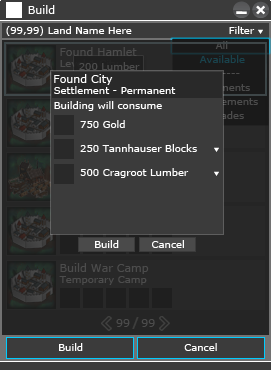
<style>
.page{position:relative;width:271px;height:370px;background:#3b3b3b}
.page>*{position:absolute;margin:0}
.t1{font:11px "Verdana";color:#ffffff}
.t2{font:10px "Verdana";color:#ffffff}
.t3{font:10px "Verdana";color:#4c4c4c}
.t4{font:11px "Verdana";color:#4c4c4c}
.t5{font:10px "Verdana";color:#19424c}
.t6{font:10px "Verdana"}
.t7{font:12px "Verdana-Bold";color:#3e3e3d}
</style>
<div class="page">
<p class="t1" style="left:28px;top:5px;width:27px;height:9px">Build</p>
<p class="t2" style="left:6px;top:26px;width:37px;height:10px">(99,99)</p>
<p class="t2" style="left:48px;top:26px;width:84px;height:8px">Land Name Here</p>
<p class="t2" style="left:229px;top:26px;width:26px;height:8px">Filter</p>
<p class="t3" style="left:215px;top:41px;width:13px;height:8px">All</p>
<p class="t4" style="left:60px;top:47px;width:77px;height:9px">Found Hamlet</p>
<p class="t3" style="left:79px;top:62px;width:61px;height:8px">200 Lumber</p>
<p class="t5" style="left:199px;top:55px;width:46px;height:8px">Available</p>
<p class="t1" style="left:54px;top:74px;width:59px;height:11px">Found City</p>
<p class="t6" style="left:204px;top:73px;width:36px;height:1px">--------</p>
<p class="t2" style="left:54px;top:86px;width:122px;height:8px">Settlement - Permanent</p>
<p class="t6" style="left:190px;top:83px;width:60px;height:8px">Settlements</p>
<p class="t2" style="left:54px;top:101px;width:108px;height:10px">Building will consume</p>
<p class="t3" style="left:185px;top:98px;width:73px;height:9px">Improvements</p>
<p class="t3" style="left:197px;top:111px;width:47px;height:10px">Upgrades</p>
<p class="t2" style="left:80px;top:120px;width:45px;height:8px">750 Gold</p>
<p class="t2" style="left:80px;top:144px;width:117px;height:8px">250 Tannhauser Blocks</p>
<p class="t2" style="left:80px;top:168px;width:109px;height:10px">500 Cragroot Lumber</p>
<p class="t2" style="left:95px;top:240px;width:24px;height:8px">Build</p>
<p class="t2" style="left:152px;top:240px;width:32px;height:8px">Cancel</p>
<p class="t4" style="left:60px;top:263px;width:89px;height:11px">Build War Camp</p>
<p class="t3" style="left:59px;top:276px;width:88px;height:9px">Temporary Camp</p>
<p class="t7" style="left:132px;top:317px;width:7px;height:12px">/</p>
<p class="t4" style="left:116px;top:319px;width:14px;height:8px">99</p>
<p class="t4" style="left:141px;top:319px;width:14px;height:8px">99</p>
<p class="t2" style="left:59px;top:343px;width:24px;height:8px">Build</p>
<p class="t2" style="left:184px;top:343px;width:33px;height:8px">Cancel</p>
</div>
